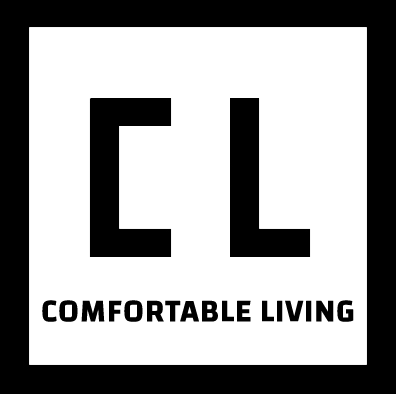
<style>
.page{position:relative;width:396px;height:394px;background:#ffffff}
.page>*{position:absolute;margin:0}
.t1{font:32px "Changa-SemiBold";color:#000000;text-transform:uppercase;font-weight:bold}
</style>
<div class="page">
<p class="t1" style="left:42px;top:300px;width:312px;height:22px">Comfortable Living</p>
</div>
